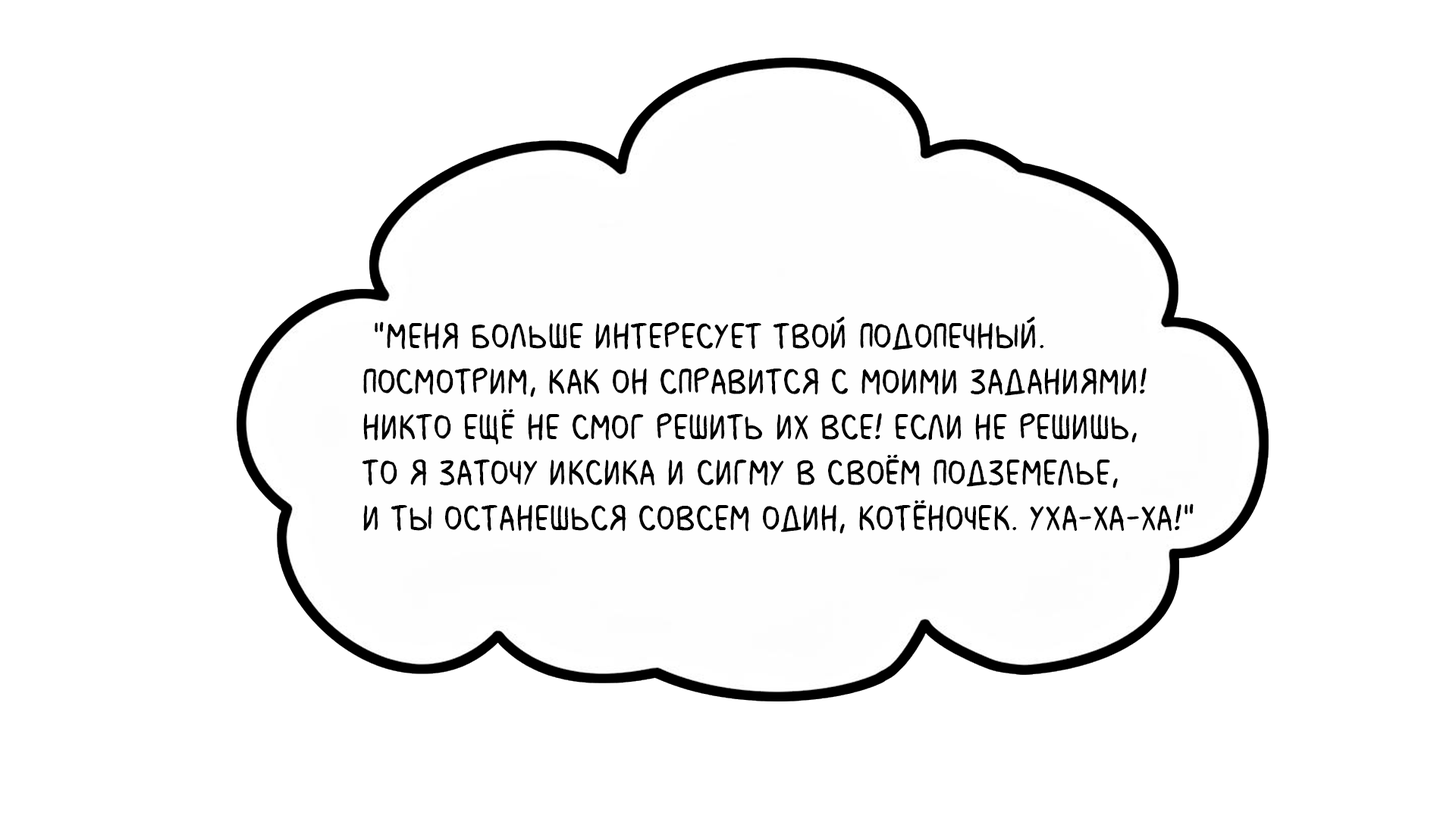
<style>
.page{position:relative;width:1456px;height:819px;background:#ffffff}
.page>*{position:absolute;margin:0}
.t1{font:37.9px "MilkMustacheBB";color:#000000}
</style>
<div class="page">
<p class="t1" style="left:362px;top:316px;width:832px;height:218px">"Меня больше интересует твой подопечный. <br>Посмотрим, как он справится с моими заданиями! <br>Никто ещё не смог решить их все! Если не решишь, <br>то я заточу Иксика и Сигму в своём подземелье, <br>и ты останешься совсем один, котёночек. Уха-ха-ха!"</p>
</div>
